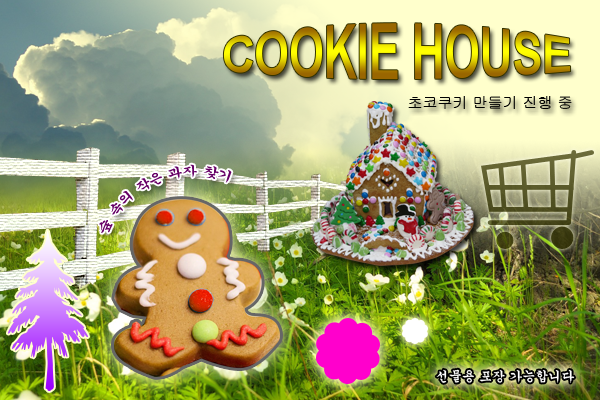
<style>
.page{position:relative;width:600px;height:400px}
.page>*{position:absolute;margin:0}
.t1{font:45px "Arial-BoldMT"}
.t2{font:15px "Gulim";color:#000000}
.t3{font:13px "Gungsuh";color:#660066}
.t4{font:13px "Gungsuh";color:#ffffff}
</style>
<div class="page">
<p class="t1" style="left:223px;top:23px;width:348px;height:57px">COOKIE HOUSE</p>
<p class="t2" style="left:408px;top:96px;width:164px;height:13px">초코쿠키 만들기 진행 중</p>
<p class="t3" style="left:99px;top:164px;width:133px;height:69px;rotate:-22deg">숲 속의 작은 과자 찾기</p>
<p class="t4" style="left:436px;top:369px;width:139px;height:14px">선물용 포장 가능합니다</p>
</div>
